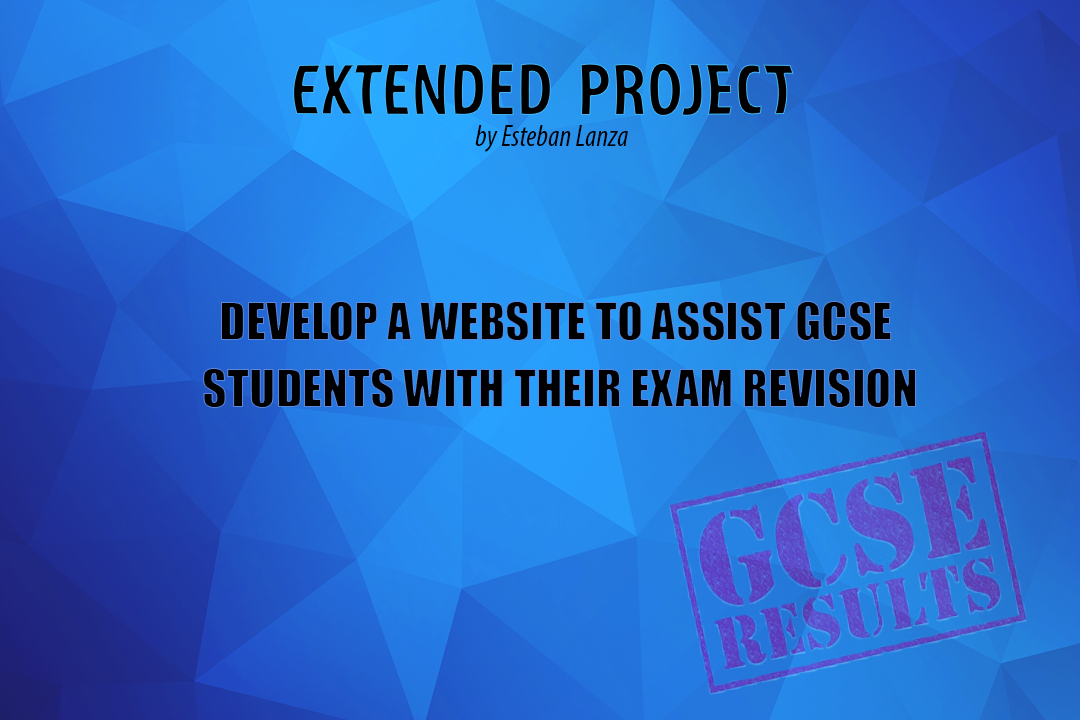
<style>
.page{position:relative;width:1080px;height:720px}
.page>*{position:absolute;margin:0}
.t1{font:72px "MyriadPro-BoldCond";color:#000000}
.t2{font:30px "MyriadPro-CondIt";color:#000000}
.t3{font:48px/67px "Impact";color:#000000}
</style>
<div class="page">
<p class="t1" style="left:293px;top:62px;width:501px;height:54px">EXTENDED  PROJECT</p>
<p class="t2" style="left:475px;top:125px;width:153px;height:27px">by Esteban Lanza</p>
<p class="t3" style="left:203px;top:301px;width:713px;height:107px;text-align:center">DEVELOP A WEBSITE TO ASSIST GCSE <br>STUDENTS WITH THEIR EXAM REVISION</p>
</div>
